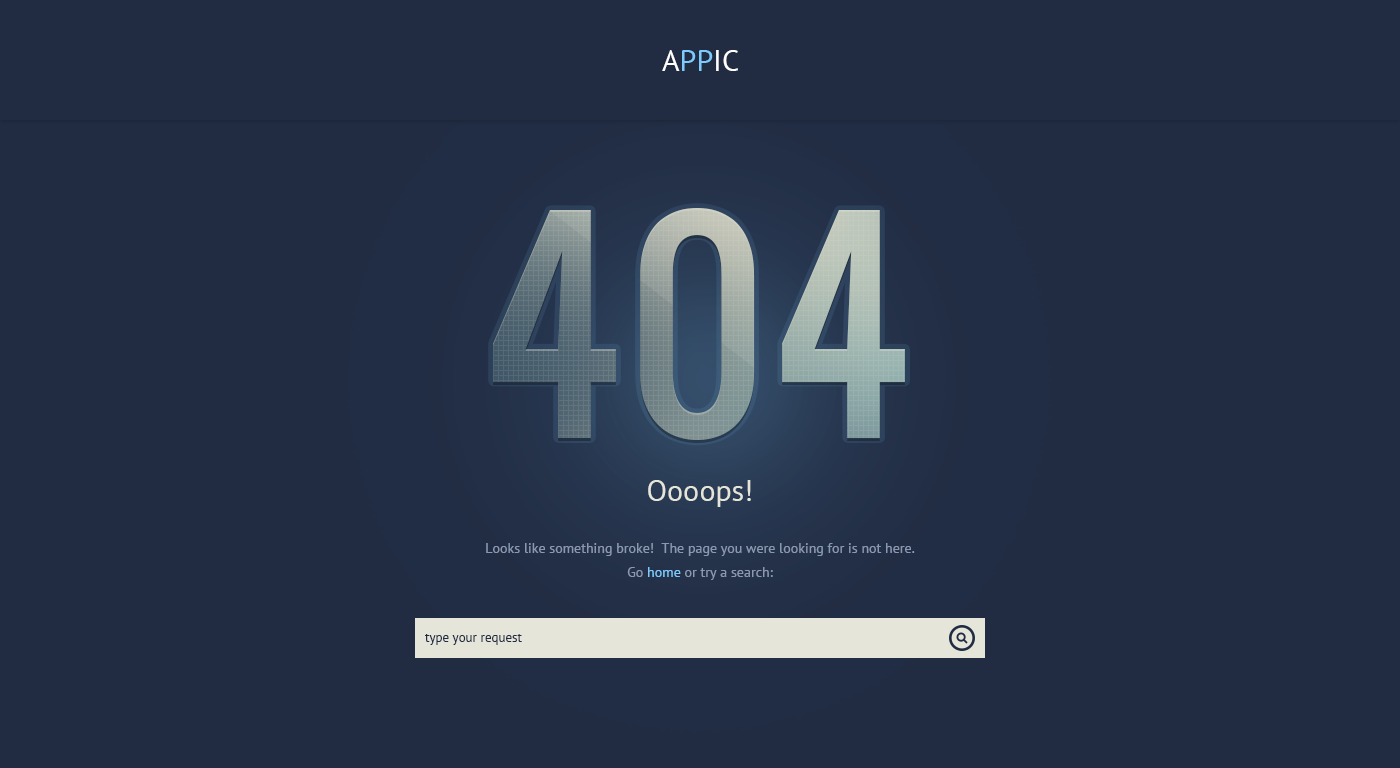
<style>
.page{position:relative;width:1400px;height:768px;background:#212c43}
.page>*{position:absolute;margin:0}
.t1{font:30px "PTSans-Regular";color:#7ccbfc;text-transform:uppercase}
.t2{font:30px "PTSans-Regular";color:#ffffff;text-transform:uppercase}
.t3{font:260px "Oswald"}
.t4{font:30px "PTSans-Regular";color:#e5e5da}
.t5{font:14px/24px "PTSans-Regular";color:#8b98b2}
.t6{font:14px/24px "PTSans-Regular";color:#7ccbfc}
.t7{font:13px "PTSans-Regular";color:#212c43}
</style>
<div class="page">
<p class="t1" style="left:662px;top:50px;width:76px;height:21px"><span class="t2">A</span>pp<span class="t2">ic</span></p>
<p class="t3" style="left:493px;top:208px;width:412px;height:232px">404</p>
<p class="t4" style="left:648px;top:480px;width:103px;height:27px">Oooops!</p>
<p class="t5" style="left:486px;top:543px;width:429px;height:37px;text-align:center">Looks like something broke!  The page you were looking for is not here.<br>Go <span class="t6">home</span> or try a search:</p>
<p class="t7" style="left:425px;top:634px;width:97px;height:11px">type your request</p>
</div>
